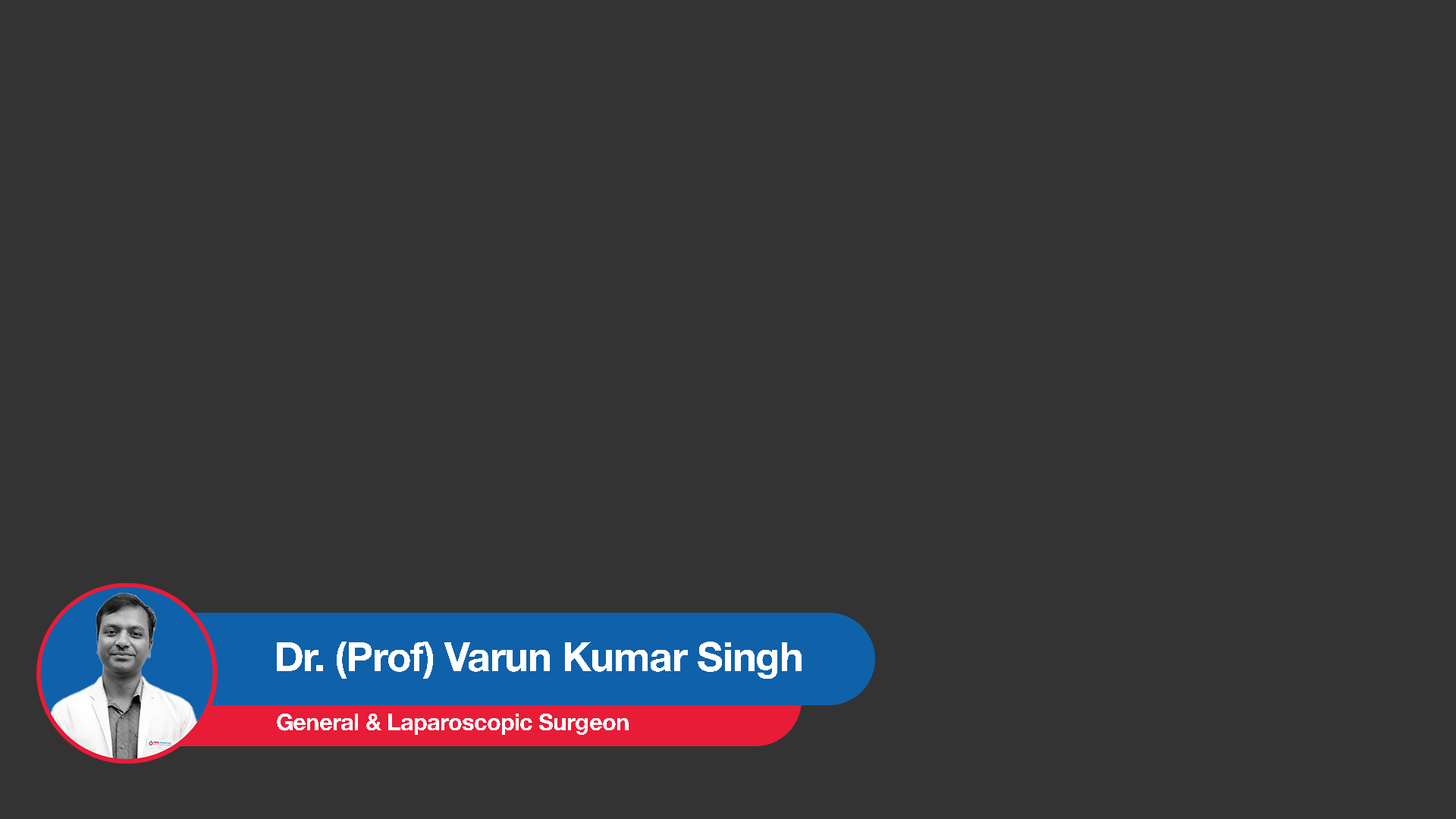
<style>
.page{position:relative;width:1456px;height:819px;background:#333333}
.page>*{position:absolute;margin:0}
.t1{font:40.6px "HelveticaNeue-Bold";letter-spacing:-0.02em;color:#ffffff}
.t2{font:23.3px "HelveticaNeue-Bold";letter-spacing:-0.02em;color:#ffffff}
</style>
<div class="page">
<p class="t1" style="left:277px;top:642px;width:525px;height:37px">Dr. (Prof) Varun Kumar Singh</p>
<p class="t2" style="left:277px;top:714px;width:352px;height:21px">General &amp; Laparoscopic Surgeon</p>
</div>
